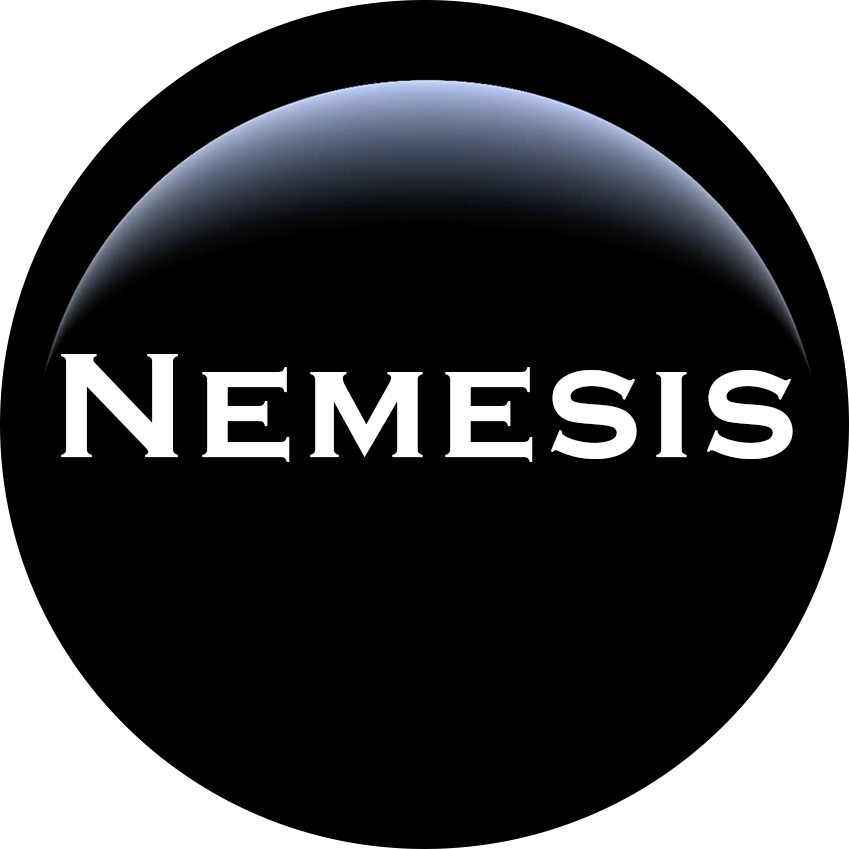
<style>
.page{position:relative;width:849px;height:849px;background:#000000}
.page>*{position:absolute;margin:0}
.t1{font:266.7px "CopperplateGothic-Bold";letter-spacing:0.05em;color:#ffffff}
</style>
<div class="page">
<p class="t1" style="left:61px;top:354px;width:732px;height:108px">Nemesis</p>
</div>
